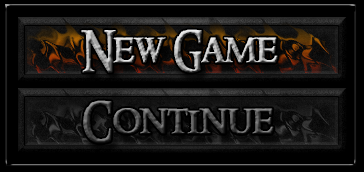
<style>
.page{position:relative;width:364px;height:172px;background:#000000}
.page>*{position:absolute;margin:0}
.t1{font:40px "RingbearerMedium";letter-spacing:-0.01em;font-weight:bold}
</style>
<div class="page">
<p class="t1" style="left:81px;top:29px;width:197px;height:44px">New Game</p>
<p class="t1" style="left:83px;top:100px;width:191px;height:44px">Continue</p>
</div>
